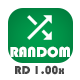
<style>
.page{position:relative;width:80px;height:80px;background:#ffffff}
.page>*{position:absolute;margin:0}
.t1{font:15px "Bauhaus93";color:#ffffff}
.t2{font:12px "Bauhaus93";color:#464646}
</style>
<div class="page">
<p class="t1" style="left:10px;top:46px;width:60px;height:12px">RANDOM</p>
<p class="t2" style="left:15px;top:65px;width:49px;height:10px">RD 1.00x</p>
</div>
